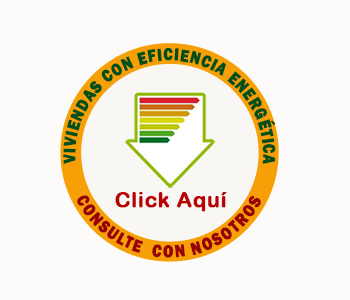
<style>
.page{position:relative;width:350px;height:300px;background:#fcfbf9}
.page>*{position:absolute;margin:0}
.t1{font:17.8px "FranklinGothic-Heavy";letter-spacing:0.03em;color:#024f1a;font-weight:bold;scale:0.83 1}
.t2{font:17.8px "FranklinGothic-Heavy";letter-spacing:0.03em;color:#990204;font-weight:bold;scale:0.83 1}
.t3{font:20.7px "ArialRoundedMTBold";letter-spacing:0.03em;color:#ba0204;font-weight:bold}
</style>
<div class="page">
<p class="t1" style="left:63px;top:48px;width:213px;height:116px">VIVIENDAS CON EFICIENCIA ENERGÉTICA</p>
<p class="t2" style="left:77px;top:195px;width:184px;height:63px">CONSULTE  CON NOSOTROS</p>
<p class="t3" style="left:115px;top:192px;width:112px;height:20px">Click Aquí</p>
</div>
